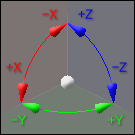
<style>
.page{position:relative;width:135px;height:135px;background:#73737c}
.page>*{position:absolute;margin:0}
.t1{font:14px "MS-UIGothic";color:#ff0000}
.t2{font:14px "MS-UIGothic";color:#0000ff}
.t3{font:14px "MS-UIGothic";color:#00ff00}
</style>
<div class="page">
<p class="t1" style="left:42px;top:9px;width:15px;height:10px">-X</p>
<p class="t2" style="left:78px;top:9px;width:15px;height:10px">+Z</p>
<p class="t1" style="left:6px;top:62px;width:15px;height:10px">+X</p>
<p class="t2" style="left:112px;top:62px;width:15px;height:10px">-Z</p>
<p class="t3" style="left:11px;top:115px;width:15px;height:10px">-Y</p>
<p class="t3" style="left:108px;top:115px;width:15px;height:10px">+Y</p>
</div>
